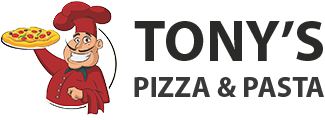
<style>
.page{position:relative;width:325px;height:120px;background:#ffffff}
.page>*{position:absolute;margin:0}
.t1{font:58px "MyriadPro-Bold";color:#2a2a29}
.t2{font:29.2px "MyriadPro-Bold";color:#3a3939}
</style>
<div class="page">
<p class="t1" style="left:134px;top:21px;width:189px;height:40px">TONY’S</p>
<p class="t2" style="left:134px;top:77px;width:190px;height:20px">PIZZA &amp; PASTA</p>
</div>
